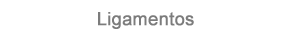
<style>
.page{position:relative;width:291px;height:40px;background:#ffffff}
.page>*{position:absolute;margin:0}
.t1{font:18px "ArialMT";color:#7c7c7c;font-weight:bold}
</style>
<div class="page">
<p class="t1" style="left:98px;top:12px;width:96px;height:17px">Ligamentos</p>
</div>
